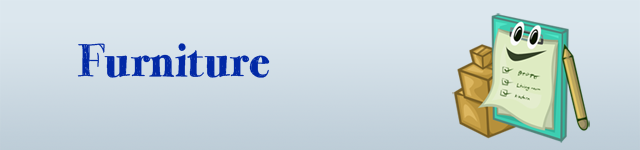
<style>
.page{position:relative;width:640px;height:150px}
.page>*{position:absolute;margin:0}
.t1{font:47.2px "MomsDiner";color:#0229a6}
</style>
<div class="page">
<p class="t1" style="left:77px;top:43px;width:193px;height:35px">Furniture</p>
</div>
